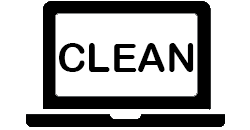
<style>
.page{position:relative;width:250px;height:130px;background:#ffffff}
.page>*{position:absolute;margin:0}
.t1{font:40px "ArialRoundedMTBold";color:#000000}
</style>
<div class="page">
<p class="t1" style="left:59px;top:43px;width:135px;height:29px">CLEAN</p>
</div>
